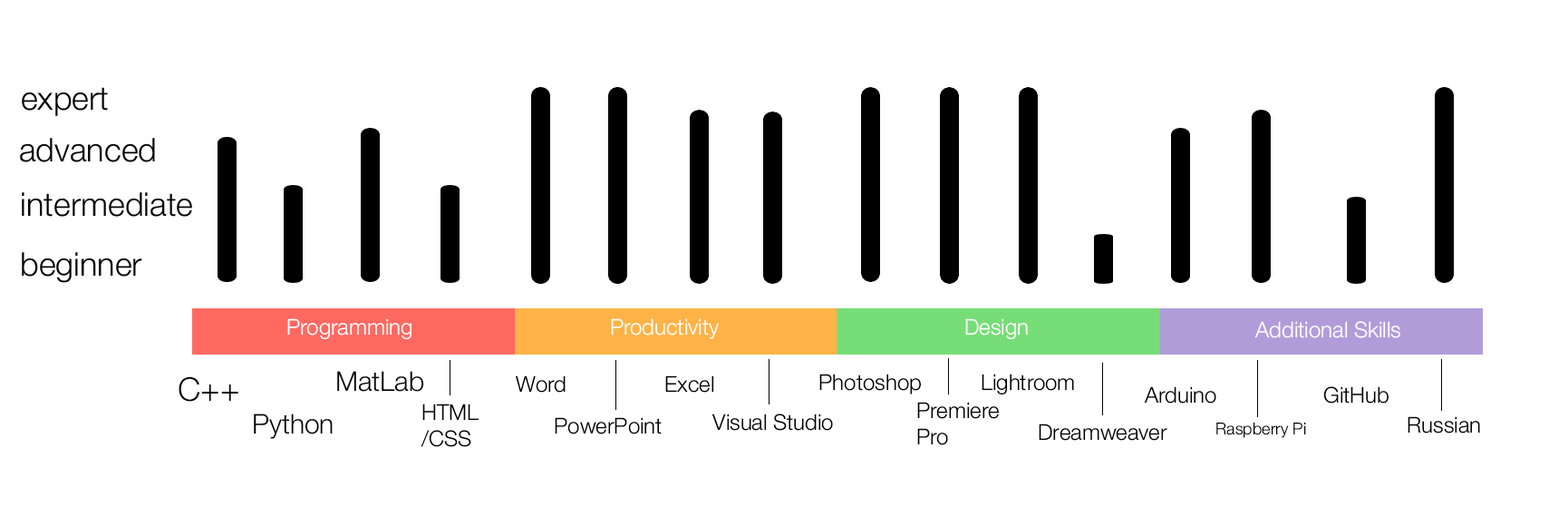
<style>
.page{position:relative;width:1568px;height:506px;background:#ffffff}
.page>*{position:absolute;margin:0}
.t1{font:32.6px "HelveticaNeue-Light";color:#000000}
.t2{font:27.2px "HelveticaNeue-Light";color:#000000}
.t3{font:21.8px "HelveticaNeue-Light";color:#000000}
.t4{font:16.3px "HelveticaNeue-Light";color:#000000}
</style>
<div class="page">
<p class="t1" style="left:179px;top:376px;width:59px;height:26px">C++</p>
<p class="t2" style="left:337px;top:371px;width:87px;height:21px">MatLab</p>
<p class="t3" style="left:516px;top:375px;width:50px;height:17px">Word</p>
<p class="t3" style="left:665px;top:375px;width:49px;height:17px">Excel</p>
<p class="t3" style="left:819px;top:373px;width:102px;height:21px">Photoshop</p>
<p class="t3" style="left:982px;top:373px;width:92px;height:21px">Lightroom</p>
<p class="t3" style="left:1144px;top:386px;width:72px;height:17px">Arduino</p>
<p class="t3" style="left:1323px;top:386px;width:66px;height:17px">GitHub</p>
<p class="t3" style="left:917px;top:402px;width:82px;height:43px">Premiere<br>Pro</p>
<p class="t2" style="left:254px;top:413px;width:79px;height:26px">Python</p>
<p class="t3" style="left:421px;top:403px;width:58px;height:44px">HTML<br>/CSS</p>
<p class="t3" style="left:711px;top:413px;width:122px;height:18px">Visual Studio</p>
<p class="t3" style="left:555px;top:417px;width:107px;height:17px">PowerPoint</p>
<p class="t3" style="left:1039px;top:423px;width:128px;height:17px">Dreamweaver</p>
<p class="t4" style="left:1216px;top:422px;width:90px;height:16px">Raspberry Pi</p>
<p class="t3" style="left:1408px;top:416px;width:72px;height:17px">Russian</p>
</div>
